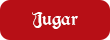
<style>
.page{position:relative;width:110px;height:40px;background:#b70f16}
.page>*{position:absolute;margin:0}
.t1{font:13px "BerryRotunda-Regular";color:#ffffff}
</style>
<div class="page">
<p class="t1" style="left:32px;top:12px;width:46px;height:17px">Jugar</p>
</div>
